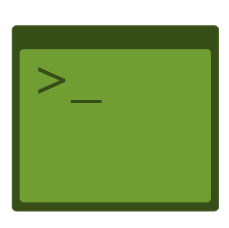
<style>
.page{position:relative;width:229px;height:228px;background:#709e32}
.page>*{position:absolute;margin:0}
.t1{font:48px "Verdana";color:#374e19}
</style>
<div class="page">
<p class="t1" style="left:38px;top:67px;width:64px;height:36px">&gt;_</p>
</div>
